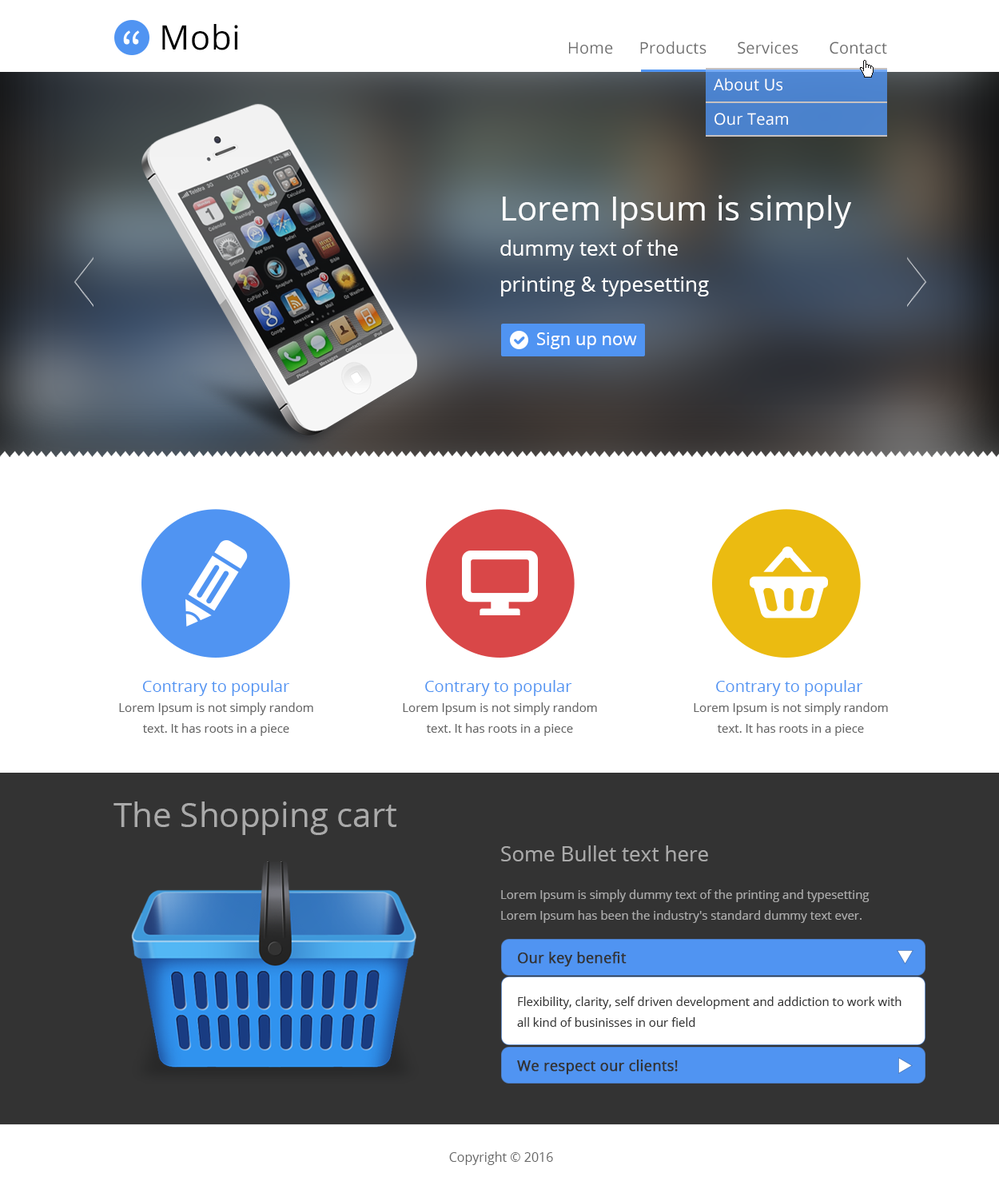
<style>
.page{position:relative;width:999px;height:1193px;background:#ffffff}
.page>*{position:absolute;margin:0}
.t1{font:33.9px "OpenSans";letter-spacing:0.01em;color:#000000}
.t2{font:51.4px "SourceSansPro-Regular";letter-spacing:0.01em;color:#ffffff}
.t3{font:16px "OpenSans";letter-spacing:0.01em;color:#6c6c6c}
.t4{font:16px "OpenSans";letter-spacing:0.01em;color:#ffffff}
.t5{font:20.8px/35.5px "OpenSans";color:#ffffff}
.t6{font:33.6px/35.5px "OpenSans";color:#ffffff}
.t7{font:17.6px "OpenSans";color:#ffffff}
.t8{font:16px "OpenSans";color:#5094f2}
.t9{font:12px/20.8px "OpenSans";color:#666666}
.t10{font:33.6px "OpenSans";color:#aaaaaa}
.t11{font:20.8px "OpenSans";color:#aaaaaa}
.t12{font:12px/20.8px "OpenSans";color:#aaaaaa}
.t13{font:14.4px "OpenSans";color:#333333;font-weight:bold}
.t14{font:12px/20.8px "OpenSans";color:#333333}
.t15{font:12.8px "OpenSans";color:#666666}
</style>
<div class="page">
<p class="t1" style="left:162px;top:24px;width:76px;height:26px">Mobi</p>
<p class="t2" style="left:123px;top:30px;width:17px;height:15px">“</p>
<p class="t3" style="left:569px;top:41px;width:318px;height:13px">Home      Products       Services       Contact</p>
<p class="t4" style="left:714px;top:78px;width:69px;height:13px">About Us</p>
<p class="t4" style="left:715px;top:113px;width:73px;height:12px">Our Team</p>
<p class="t5" style="left:500px;top:195px;width:351px;height:102px"><span class="t6">Lorem Ipsum is simply <br></span>dummy text of the <br>printing &amp; typesetting</p>
<p class="t7" style="left:537px;top:333px;width:100px;height:16px">Sign up now</p>
<p class="t8" style="left:142px;top:680px;width:147px;height:16px">Contrary to popular</p>
<p class="t8" style="left:425px;top:680px;width:147px;height:16px">Contrary to popular</p>
<p class="t8" style="left:716px;top:680px;width:147px;height:16px">Contrary to popular</p>
<p class="t9" style="left:119px;top:703px;width:194px;height:33px;text-align:center">Lorem Ipsum is not simply random text. It has roots in a piece</p>
<p class="t9" style="left:403px;top:703px;width:194px;height:33px;text-align:center">Lorem Ipsum is not simply random text. It has roots in a piece</p>
<p class="t9" style="left:694px;top:703px;width:194px;height:33px;text-align:center">Lorem Ipsum is not simply random text. It has roots in a piece</p>
<p class="t10" style="left:114px;top:802px;width:282px;height:33px">The Shopping cart</p>
<p class="t11" style="left:501px;top:846px;width:207px;height:16px">Some Bullet text here</p>
<p class="t12" style="left:501px;top:890px;width:369px;height:33px">Lorem Ipsum is simply dummy text of the printing and typesetting <br>Lorem Ipsum has been the industry's standard dummy text ever.</p>
<p class="t13" style="left:518px;top:952px;width:109px;height:15px">Our key benefit</p>
<p class="t14" style="left:517px;top:997px;width:385px;height:30px">Flexibility, clarity, self driven development and addiction to work with all kind of businisses in our field</p>
<p class="t13" style="left:517px;top:1060px;width:161px;height:15px">We respect our clients!</p>
<p class="t15" style="left:449px;top:1152px;width:104px;height:13px">Copyright © 2016</p>
</div>
